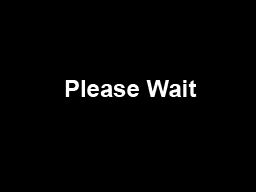
<style>
.page{position:relative;width:256px;height:192px;background:#000000}
.page>*{position:absolute;margin:0}
.t1{font:24px "Arial-BoldMT";color:#ffffff}
</style>
<div class="page">
<p class="t1" style="left:65px;top:80px;width:132px;height:17px">Please Wait</p>
</div>
